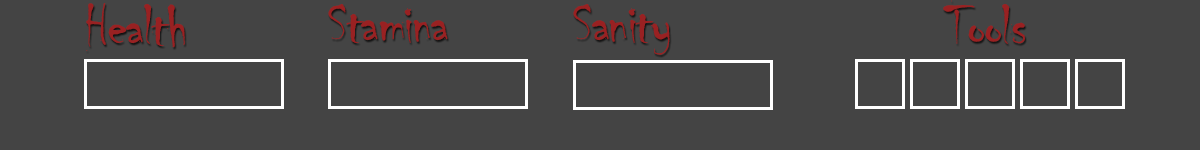
<style>
.page{position:relative;width:1200px;height:150px;background:#444444}
.page>*{position:absolute;margin:0}
.t1{font:59.8px "Chiller-Regular";letter-spacing:-0.025em;color:#992122}
</style>
<div class="page">
<p class="t1" style="left:86px;top:3px;width:99px;height:48px">Health</p>
<p class="t1" style="left:328px;top:4px;width:120px;height:39px">Stamina</p>
<p class="t1" style="left:573px;top:4px;width:97px;height:51px">Sanity</p>
<p class="t1" style="left:943px;top:0px;width:82px;height:44px">Tools</p>
</div>
